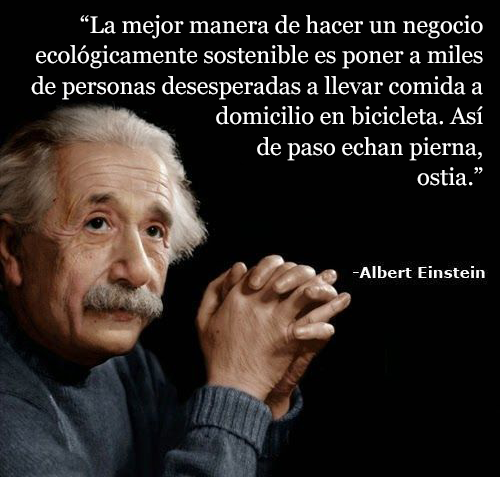
<style>
.page{position:relative;width:500px;height:477px;background:#010101}
.page>*{position:absolute;margin:0}
.t1{font:23.7px "Georgia";color:#ffffff}
</style>
<div class="page">
<p class="t1" style="left:31px;top:15px;width:452px;height:171px;text-align:right">“La mejor manera de hacer un negocio<br>ecológicamente sostenible es poner a miles<br>de personas desesperadas a llevar comida a<br>domicilio en bicicleta. Así<br>de paso echan pierna,<br>ostia.”</p>
</div>
